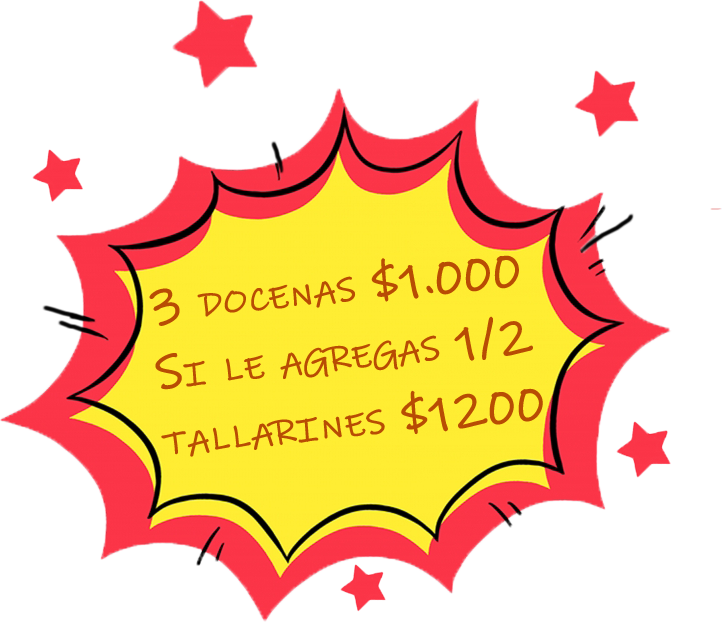
<style>
.page{position:relative;width:722px;height:622px;background:#ffffff}
.page>*{position:absolute;margin:0}
.t1{font:46.4px/67.5px "InkFree";color:#b84c04;font-variant:small-caps;font-weight:bold;scale:1.06 1}
</style>
<div class="page">
<p class="t1" style="left:149px;top:255px;width:394px;height:202px;rotate:-6deg">3 docenas $1.000<br>Si le agregas 1/2 <br>tallarines $1200</p>
</div>
